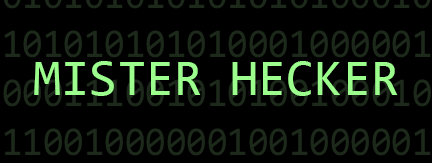
<style>
.page{position:relative;width:432px;height:163px;background:#000000}
.page>*{position:absolute;margin:0}
.t1{font:51.1px "Consolas";color:#9cfe8d}
</style>
<div class="page">
<p class="t1" style="left:34px;top:61px;width:364px;height:35px">MISTER HECKER</p>
</div>
